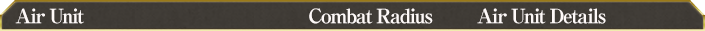
<style>
.page{position:relative;width:705px;height:31px}
.page>*{position:absolute;margin:0}
.t1{font:20px "RyuminPro-ExBold";letter-spacing:-0.08em;color:#fef9f8}
</style>
<div class="page">
<p class="t1" style="left:15px;top:8px;width:591px;height:16px">Air Unit         Combat Radius         Air Unit Details</p>
</div>
